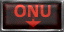
<style>
.page{position:relative;width:64px;height:32px}
.page>*{position:absolute;margin:0}
.t1{font:18.7px "Calibri-Bold";letter-spacing:0.02em;color:#d74134;text-transform:uppercase}
</style>
<div class="page">
<p class="t1" style="left:14px;top:4px;width:37px;height:14px">onu</p>
</div>
